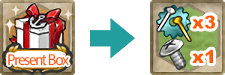
<style>
.page{position:relative;width:225px;height:75px;background:#ffffff}
.page>*{position:absolute;margin:0}
.t1{font:16px "AdobeClean-SemiCn";letter-spacing:-0.08em;color:#ff5a00}
</style>
<div class="page">
<p class="t1" style="left:8px;top:54px;width:61px;height:12px">Present Box</p>
</div>
